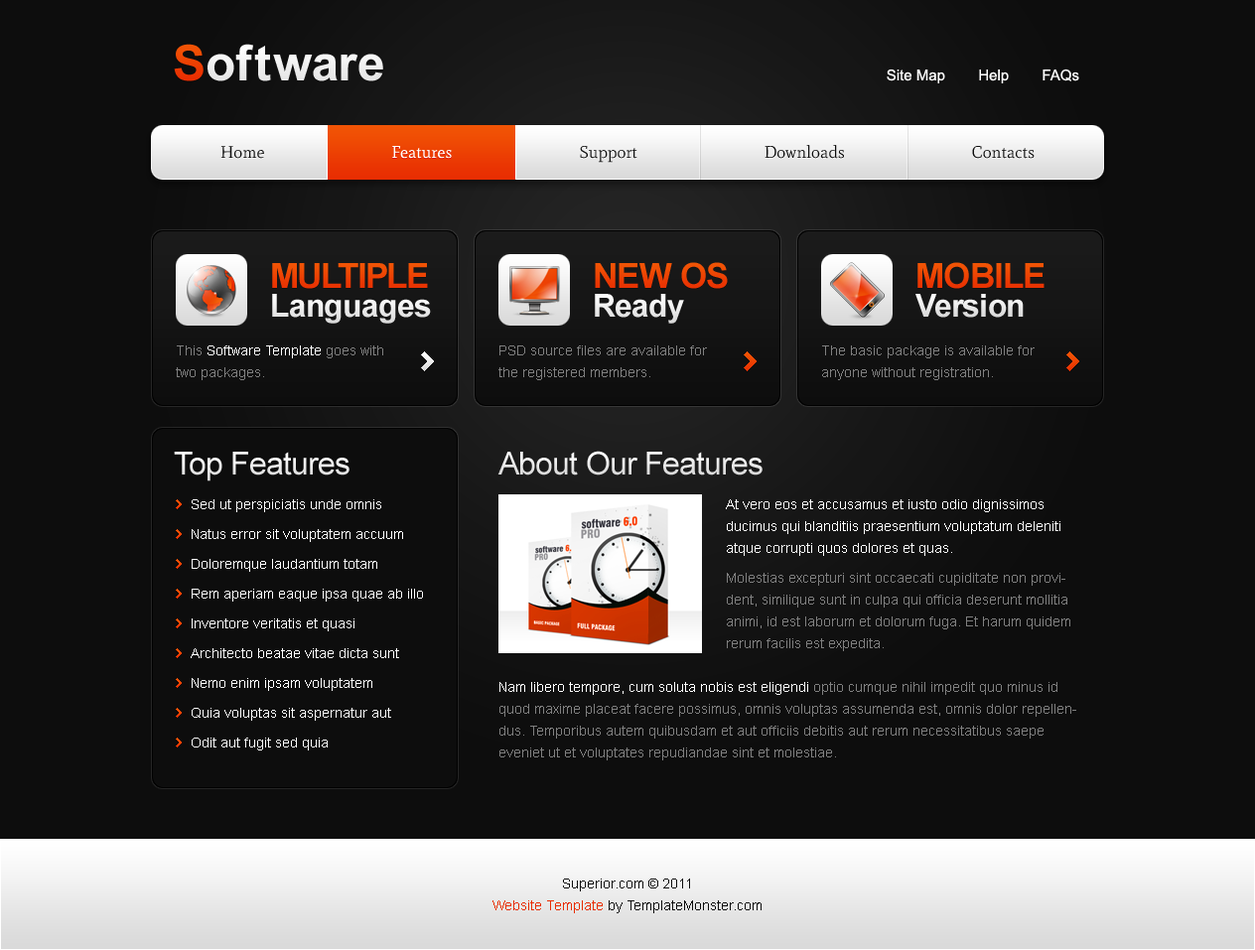
<style>
.page{position:relative;width:1255px;height:950px;background:#0d0d0d}
.page>*{position:absolute;margin:0}
.t1{font:49.6px "Arial-BoldMT";letter-spacing:0.05em;color:#ffffff}
.t2{font:49.6px "Arial-BoldMT";color:#f15405}
.t3{font:49.6px "Arial-BoldMT";letter-spacing:-0.025em;color:#ffffff}
.t4{font:49.6px "Arial-BoldMT";color:#ffffff}
.t5{font:14.9px "ArialMT";color:#ffffff}
.t6{font:16.9px "Mate-Regular";color:#0d0d0d}
.t7{font:16.9px "Mate-Regular"}
.t8{font:34.8px "Arial-BoldMT";letter-spacing:-0.05em;color:#f15405;text-transform:uppercase}
.t9{font:34.8px "Arial-BoldMT";letter-spacing:-0.025em;color:#f15405;text-transform:uppercase}
.t10{font:31.8px "Arial-BoldMT";letter-spacing:-0.025em;color:#ffffff}
.t11{font:31.8px "Arial-BoldMT";letter-spacing:-0.025em;color:#e9e9e9}
.t12{font:13.9px/21.8px "ArialMT";color:#808080}
.t13{font:13.9px/21.8px "ArialMT";color:#ffffff}
.t14{font:31.8px "ArialMT";letter-spacing:-0.025em;color:#ffffff}
.t15{font:31.8px "ArialMT";letter-spacing:-0.025em;color:#e9e9e9}
.t16{font:13.9px/29.8px "ArialMT";color:#ffffff}
.t17{font:13.9px/21.8px "ArialMT";color:#0d0d0d}
.t18{font:13.9px/21.8px "ArialMT";color:#e82d02}
</style>
<div class="page">
<p class="t1" style="left:174px;top:44px;width:209px;height:37px"><span class="t2">S</span><span class="t3">o</span>ft<span class="t4">w</span><span class="t3">a</span><span class="t4">re</span></p>
<p class="t5" style="left:887px;top:69px;width:192px;height:14px">Site Map        Help        FAQs</p>
<p class="t6" style="left:220px;top:145px;width:815px;height:18px">Home                                Features                                Support                                Downloads                                Contacts</p>
<p class="t7" style="left:220px;top:145px;width:815px;height:18px">Home                                Features                                Support                                Downloads                                Contacts</p>
<p class="t8" style="left:272px;top:263px;width:156px;height:26px">Multiple</p>
<p class="t9" style="left:595px;top:262px;width:133px;height:27px">New OS</p>
<p class="t9" style="left:917px;top:262px;width:127px;height:27px">Mobile</p>
<p class="t10" style="left:272px;top:294px;width:159px;height:30px">Languages</p>
<p class="t10" style="left:595px;top:294px;width:89px;height:30px">Ready</p>
<p class="t11" style="left:915px;top:294px;width:109px;height:24px">Version</p>
<p class="t12" style="left:176px;top:346px;width:207px;height:34px">This <span class="t13">Software Template</span> goes with two packages.</p>
<p class="t12" style="left:498px;top:346px;width:209px;height:34px">PSD source files are available for the registered members.<br> of Templates.com.</p>
<p class="t12" style="left:822px;top:346px;width:213px;height:34px">The basic package is available for anyone without registration.</p>
<p class="t14" style="left:174px;top:452px;width:175px;height:30px">Top Features</p>
<p class="t15" style="left:497px;top:451px;width:266px;height:25px">About Our Features</p>
<p class="t16" style="left:191px;top:499px;width:232px;height:252px">Sed ut perspiciatis unde omnis<br>Natus error sit voluptatem accuum <br>Doloremque laudantium totam<br>Rem aperiam eaque ipsa quae ab illo <br>Inventore veritatis et quasi<br>Architecto beatae vitae dicta sunt <br>Nemo enim ipsam voluptatem<br>Quia voluptas sit aspernatur aut<br>Odit aut fugit sed quia<br> consequuntur magni dolores eos qui ratione voluptatem sequi nesciunt.</p>
<p class="t17" style="left:492px;top:879px;width:270px;height:34px;text-align:center">Superior.com © 2011 <br><span class="t18">Website Template</span> by TemplateMonster.com</p>
</div>
